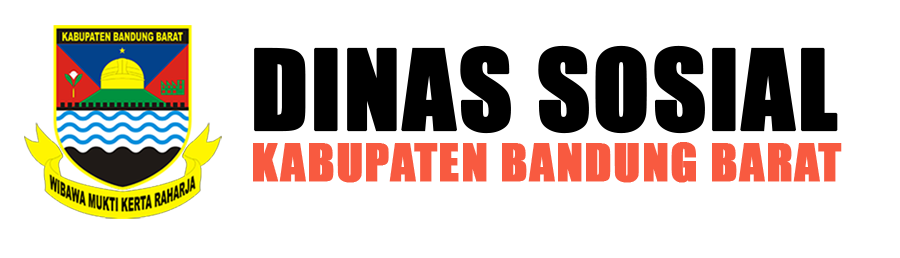
<style>
.page{position:relative;width:900px;height:258px;background:#ffffff}
.page>*{position:absolute;margin:0}
.t1{font:103.2px "Impact";letter-spacing:0.005em;color:#000000;font-weight:bold}
.t2{font:48px "Impact";letter-spacing:0.025em;color:#f85a40;font-weight:bold}
</style>
<div class="page">
<p class="t1" style="left:254px;top:45px;width:584px;height:89px">DINAS SOSIAL</p>
<p class="t2" style="left:253px;top:142px;width:589px;height:41px">KABUPATEN BANDUNG BARAT</p>
</div>
